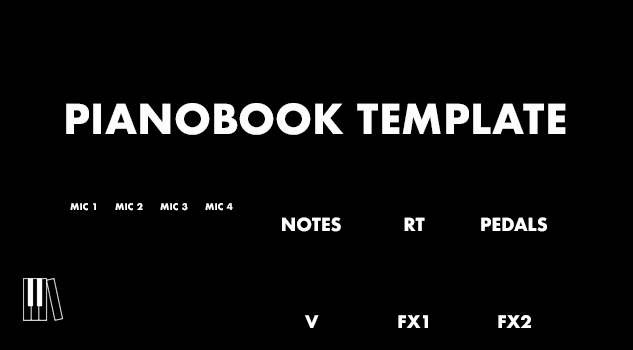
<style>
.page{position:relative;width:633px;height:350px;background:#000000}
.page>*{position:absolute;margin:0}
.t1{font:40px "Futura-Bold";color:#fefdfd;text-transform:uppercase}
.t2{font:9.1px "Futura-Bold";color:#ffffff;text-transform:uppercase}
.t3{font:17.6px "Futura-Bold";color:#ffffff;text-transform:uppercase;scale:0.97 1}
.t4{font:16.8px "Futura-Bold";color:#ffffff;text-transform:uppercase}
</style>
<div class="page">
<p class="t1" style="left:66px;top:103px;width:500px;height:32px">Pianobook Template</p>
<p class="t2" style="left:70px;top:203px;width:26px;height:8px">MIC 1</p>
<p class="t2" style="left:115px;top:203px;width:28px;height:8px">MIC 2</p>
<p class="t2" style="left:160px;top:203px;width:28px;height:8px">MIC 3</p>
<p class="t2" style="left:205px;top:203px;width:28px;height:8px">MIC 4</p>
<p class="t3" style="left:282px;top:217px;width:59px;height:15px">NOTES</p>
<p class="t3" style="left:404px;top:217px;width:21px;height:14px">RT</p>
<p class="t3" style="left:481px;top:217px;width:66px;height:15px">PEDALS</p>
<p class="t4" style="left:305px;top:315px;width:14px;height:13px">V</p>
<p class="t4" style="left:398px;top:315px;width:30px;height:13px">FX1</p>
<p class="t4" style="left:498px;top:315px;width:33px;height:13px">FX2</p>
</div>
